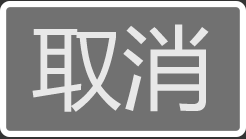
<style>
.page{position:relative;width:246px;height:139px;background:#717171}
.page>*{position:absolute;margin:0}
.t1{font:90.6px "MicrosoftYaHei";color:#ffffff}
</style>
<div class="page">
<p class="t1" style="left:32px;top:24px;width:177px;height:88px">取消</p>
</div>
